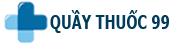
<style>
.page{position:relative;width:170px;height:45px;background:#ffffff}
.page>*{position:absolute;margin:0}
.t1{font:19px "Tahoma-Bold";color:#013b5c;scale:0.76 1}
</style>
<div class="page">
<p class="t1" style="left:50px;top:10px;width:119px;height:23px">QUẦY THUỐC 99</p>
</div>
